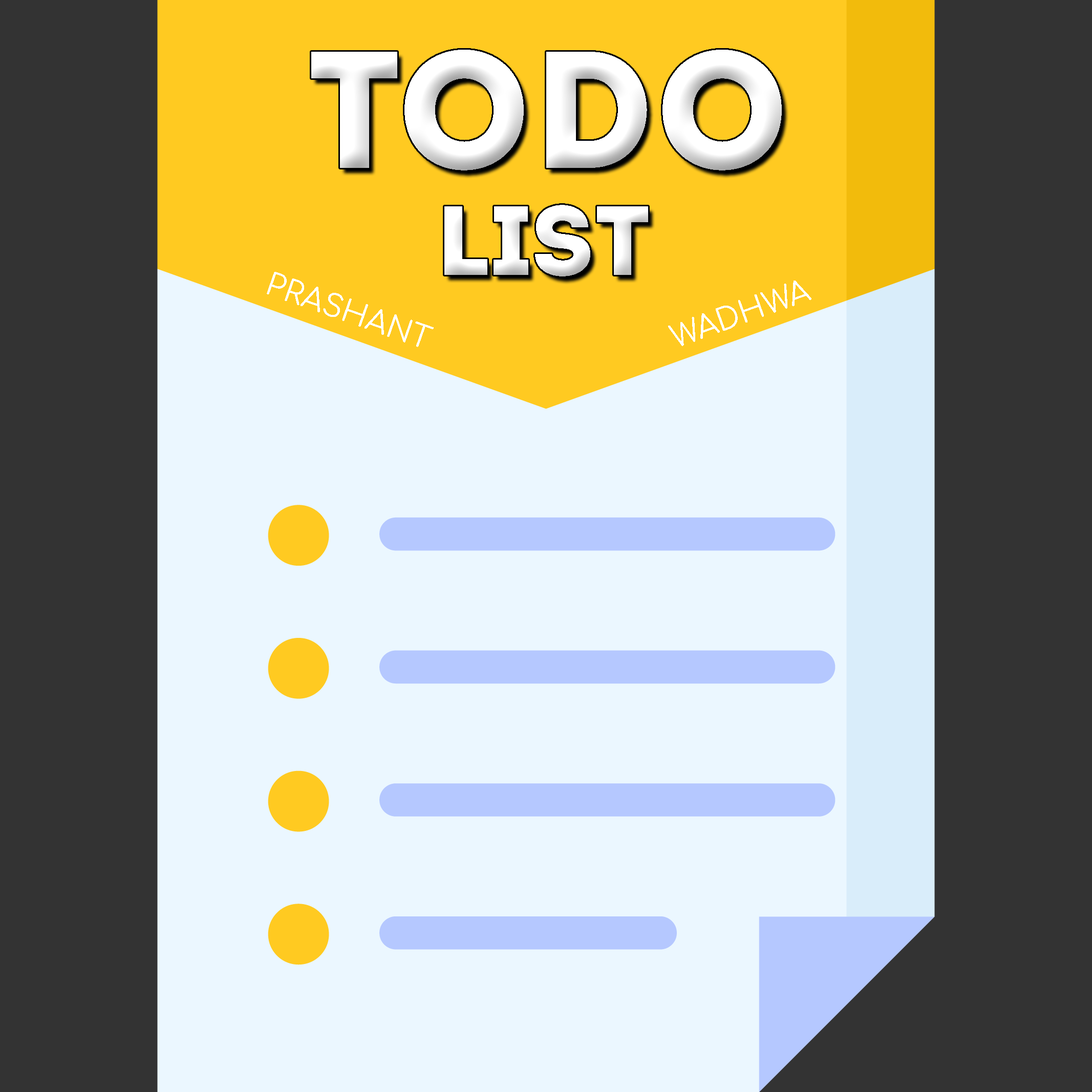
<style>
.page{position:relative;width:1092px;height:1092px;background:#ebf7ff}
.page>*{position:absolute;margin:0}
.t1{font:166.2px "Intro";color:#ffffff}
.t2{font:98.4px "Intro";color:#ffffff}
.t3{font:30.7px "Comfortaa-Regular";color:#ffffff}
</style>
<div class="page">
<p class="t1" style="left:311px;top:50px;width:471px;height:120px">Todo</p>
<p class="t2" style="left:444px;top:205px;width:204px;height:71px">list</p>
<p class="t3" style="left:267px;top:272px;width:167px;height:75px;rotate:19deg">PRASHANT</p>
<p class="t3" style="left:668px;top:281px;width:143px;height:65px;rotate:-20deg">WADHWA</p>
</div>
